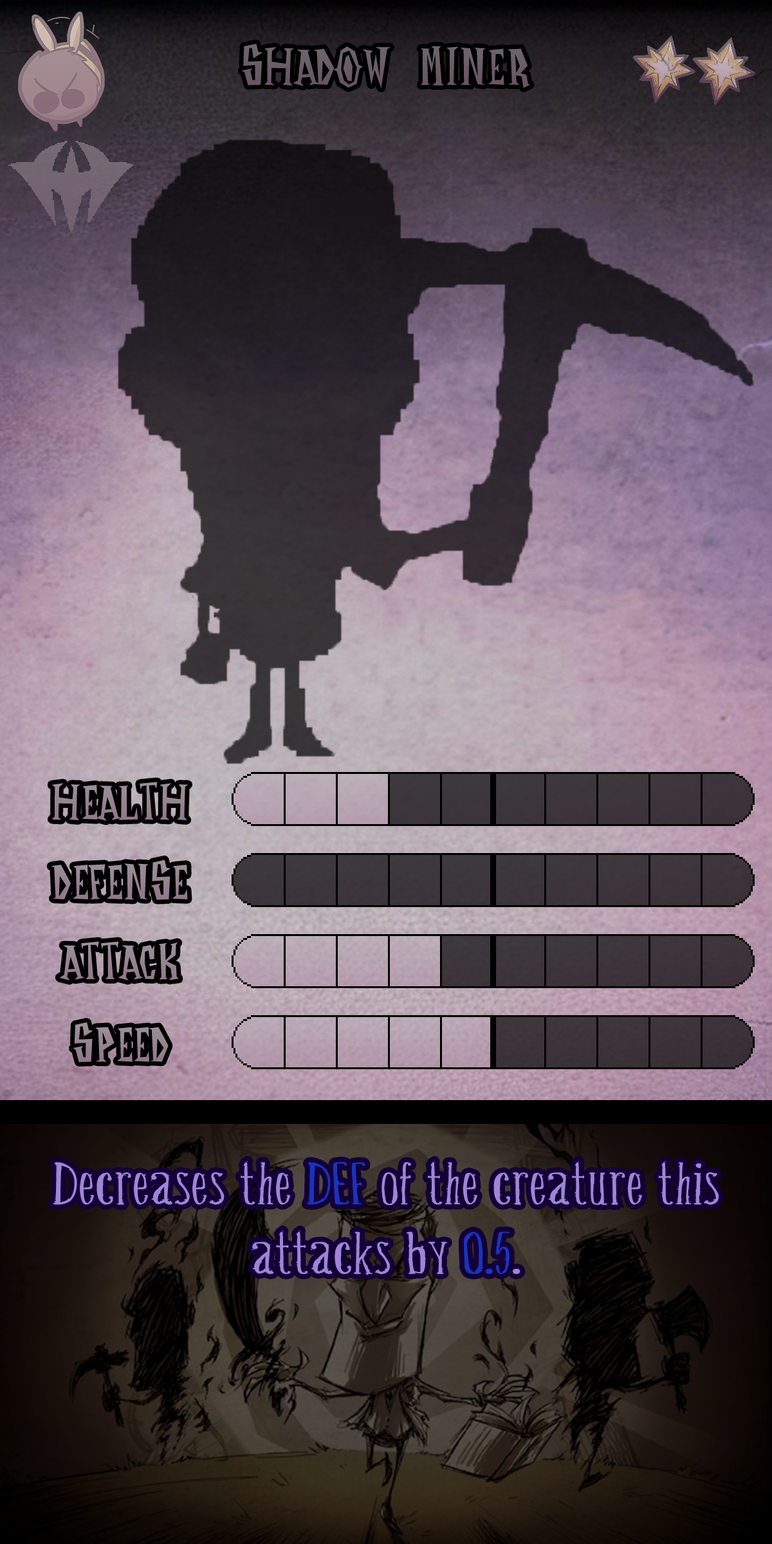
<style>
.page{position:relative;width:772px;height:1544px}
.page>*{position:absolute;margin:0}
.t1{font:96.5px "DontStarveNameFont";color:#6a5d67}
.t2{font:92.7px "DontStarveNameFont";color:#968391}
.t3{font:79.1px "Belisaplumillamanual";color:#9e85d7;scale:1.67 1}
.t4{font:79.1px "Belisaplumillamanual";color:#1b32bd;scale:1.67 1}
</style>
<div class="page">
<p class="t1" style="left:242px;top:44px;width:288px;height:44px">Shadow Miner</p>
<p class="t2" style="left:51px;top:782px;width:138px;height:39px">Health</p>
<p class="t2" style="left:51px;top:860px;width:137px;height:40px">Defense</p>
<p class="t2" style="left:59px;top:941px;width:120px;height:40px">Attack</p>
<p class="t2" style="left:73px;top:1022px;width:96px;height:40px">Speed</p>
<p class="t3" style="left:53px;top:1161px;width:666px;height:114px">Decreases the <span class="t4">DEF</span> of the creature this attacks by <span class="t4">0.5</span>.</p>
</div>
